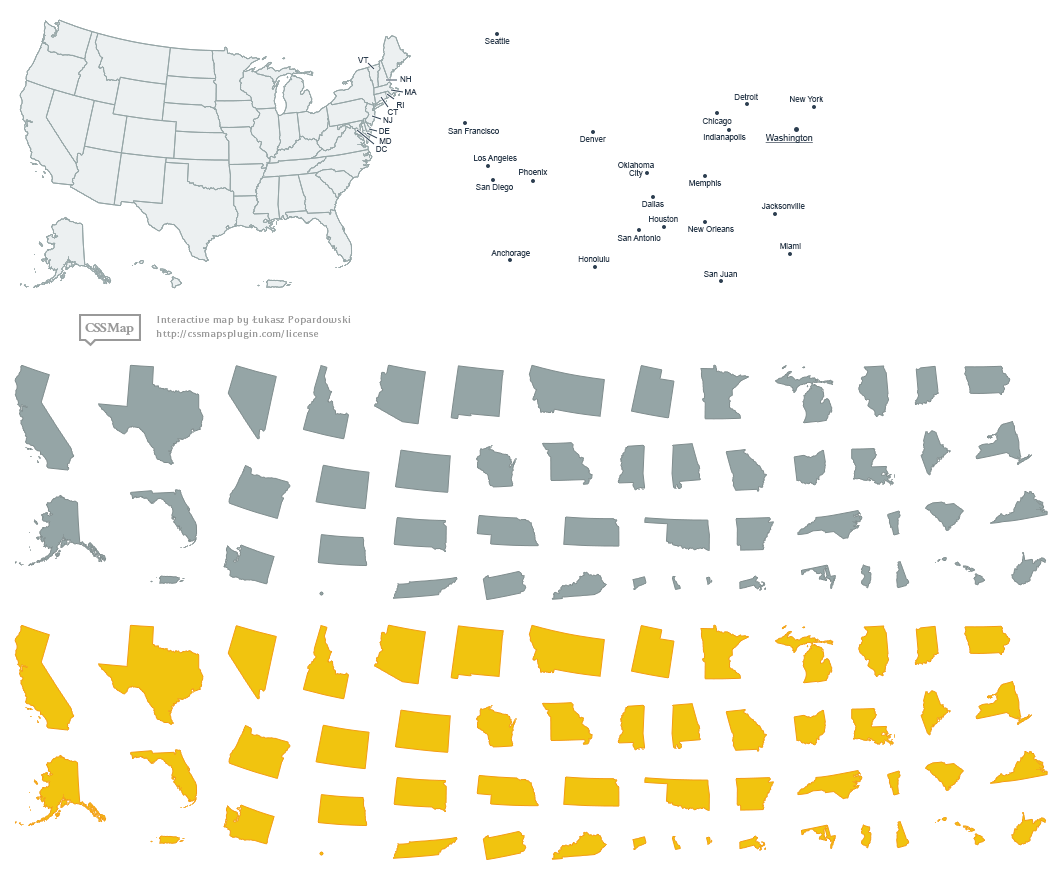
<style>
.page{position:relative;width:1063px;height:875px;background:#ffffff}
.page>*{position:absolute;margin:0}
.t1{font:8px "ArialMT";color:#2c3e50}
.t2{font:9px "ArialMT";color:#2c3e50;text-decoration:underline}
.t3{font:8px/8px "ArialMT";color:#2c3e50}
</style>
<div class="page">
<p class="t1" style="left:485px;top:37px;width:25px;height:7px">Seattle</p>
<p class="t1" style="left:358px;top:57px;width:11px;height:6px">VT</p>
<p class="t1" style="left:400px;top:76px;width:11px;height:6px">NH</p>
<p class="t1" style="left:405px;top:89px;width:12px;height:6px">MA</p>
<p class="t1" style="left:397px;top:102px;width:7px;height:6px">RI</p>
<p class="t1" style="left:734px;top:93px;width:24px;height:7px">Detroit</p>
<p class="t1" style="left:790px;top:96px;width:34px;height:6px">New York</p>
<p class="t1" style="left:387px;top:109px;width:12px;height:6px">CT</p>
<p class="t1" style="left:383px;top:117px;width:10px;height:6px">NJ</p>
<p class="t1" style="left:702px;top:118px;width:30px;height:8px">Chicago</p>
<p class="t1" style="left:379px;top:128px;width:11px;height:6px">DE</p>
<p class="t1" style="left:448px;top:128px;width:51px;height:6px">San Francisco</p>
<p class="t1" style="left:580px;top:136px;width:26px;height:6px">Denver</p>
<p class="t1" style="left:703px;top:134px;width:43px;height:8px">Indianapolis</p>
<p class="t2" style="left:765px;top:134px;width:48px;height:9px">Washington</p>
<p class="t1" style="left:376px;top:146px;width:11px;height:6px">DC</p>
<p class="t1" style="left:379px;top:138px;width:13px;height:6px">MD</p>
<p class="t1" style="left:474px;top:155px;width:43px;height:8px">Los Angeles</p>
<p class="t1" style="left:519px;top:169px;width:29px;height:6px">Phoenix</p>
<p class="t3" style="left:618px;top:162px;width:36px;height:16px;text-align:center">Oklahoma<br>City</p>
<p class="t1" style="left:476px;top:184px;width:37px;height:8px">San Diego</p>
<p class="t1" style="left:689px;top:180px;width:33px;height:8px">Memphis</p>
<p class="t1" style="left:642px;top:201px;width:22px;height:6px">Dallas</p>
<p class="t1" style="left:761px;top:203px;width:44px;height:6px">Jacksonville</p>
<p class="t1" style="left:649px;top:215px;width:29px;height:7px">Houston</p>
<p class="t1" style="left:688px;top:226px;width:46px;height:6px">New Orleans</p>
<p class="t1" style="left:617px;top:234px;width:44px;height:7px">San Antonio</p>
<p class="t1" style="left:780px;top:243px;width:21px;height:6px">Miami</p>
<p class="t1" style="left:491px;top:250px;width:39px;height:8px">Anchorage</p>
<p class="t1" style="left:578px;top:256px;width:32px;height:6px">Honolulu</p>
<p class="t1" style="left:704px;top:271px;width:33px;height:6px">San Juan</p>
</div>
